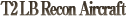
<style>
.page{position:relative;width:126px;height:18px;background:#ffffff}
.page>*{position:absolute;margin:0}
.t1{font:18px "RyuminPro-ExBold";letter-spacing:-0.13em;color:#4a3f32;font-weight:bold;scale:0.8 1}
</style>
<div class="page">
<p class="t1" style="left:0px;top:1px;width:127px;height:15px">T2 LB Recon Aircraft</p>
</div>
